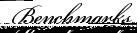
<style>
.page{position:relative;width:137px;height:33px;background:#ffffff}
.page>*{position:absolute;margin:0}
.t1{font:36px "BickhamScriptPro-Regular"}
</style>
<div class="page">
<p class="t1" style="left:3px;top:3px;width:121px;height:21px">Benchmarks</p>
</div>
